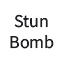
<style>
.page{position:relative;width:64px;height:64px;background:#ffffff}
.page>*{position:absolute;margin:0}
.t1{font:18px "SourceSansRoman-Regular";color:#202024}
</style>
<div class="page">
<p class="t1" style="left:10px;top:14px;width:44px;height:35px;text-align:center">Stun<br>Bomb</p>
</div>
